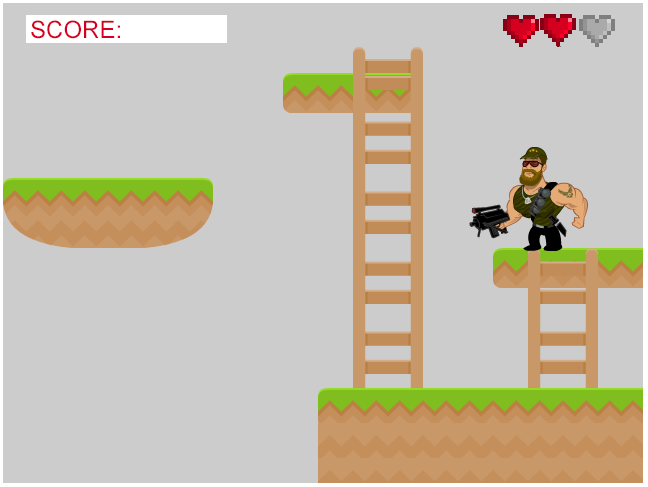
<style>
.page{position:relative;width:648px;height:487px;background:#cccccc}
.page>*{position:absolute;margin:0}
.t1{font:24px "ArialMT";color:#d50020}
</style>
<div class="page">
<p class="t1" style="left:31px;top:20px;width:89px;height:19px">SCORE:</p>
</div>
